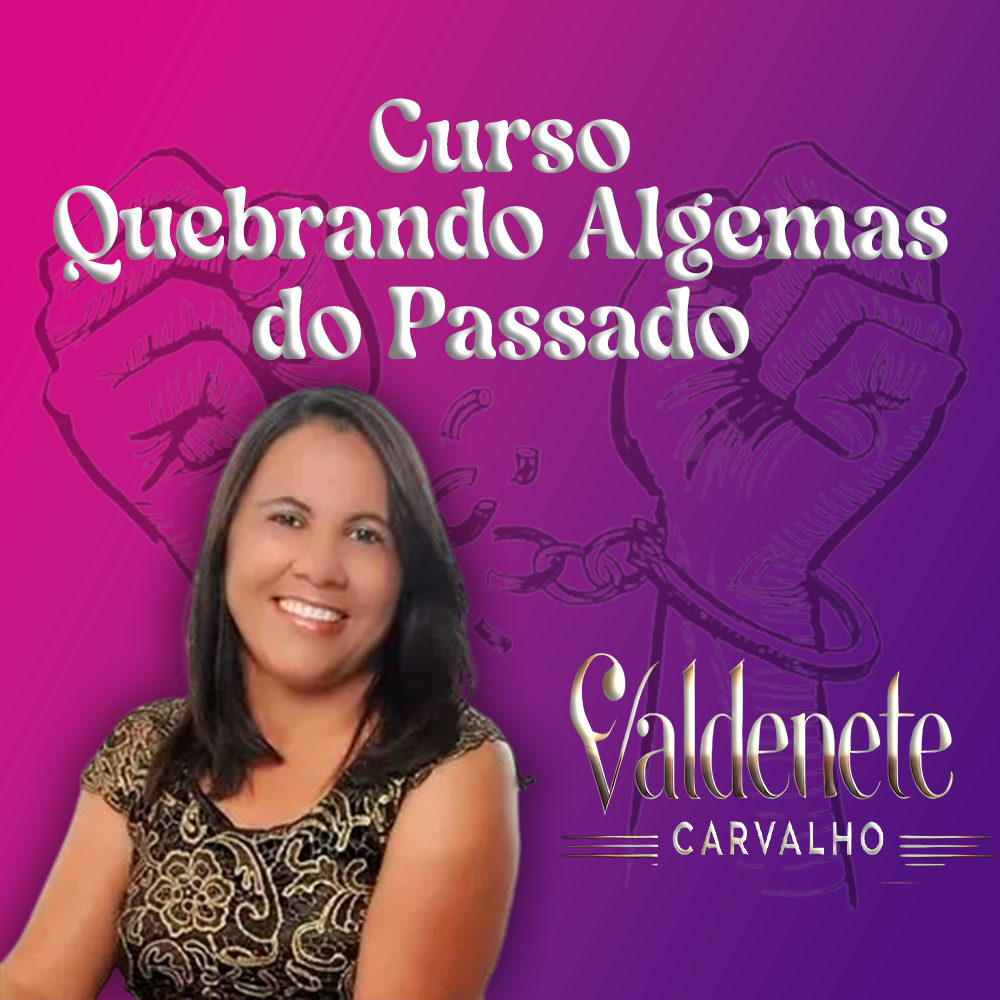
<style>
.page{position:relative;width:1000px;height:1000px}
.page>*{position:absolute;margin:0}
.t1{font:100px "Londona"}
.t2{font:100px/100px "Londona"}
</style>
<div class="page">
<p class="t1" style="left:369px;top:98px;width:261px;height:75px">Curso</p>
<p class="t2" style="left:53px;top:185px;width:895px;height:175px;text-align:center">Quebrando Algemas do Passado</p>
</div>
